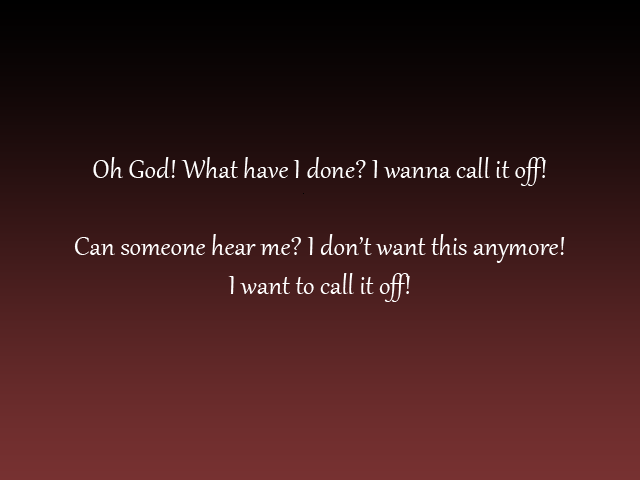
<style>
.page{position:relative;width:640px;height:480px}
.page>*{position:absolute;margin:0}
.t1{font:32px "Gabriola";color:#ffffff}
.t2{font:37.3px "Gabriola";color:#ffffff}
</style>
<div class="page">
<p class="t1" style="left:74px;top:157px;width:491px;height:145px;text-align:center"><span class="t2"><br></span><br><br><br>Oh God! What have I done? I wanna call it off!<br><br>Can someone hear me? I don’t want this anymore!<br>I want to call it off!</p>
</div>
